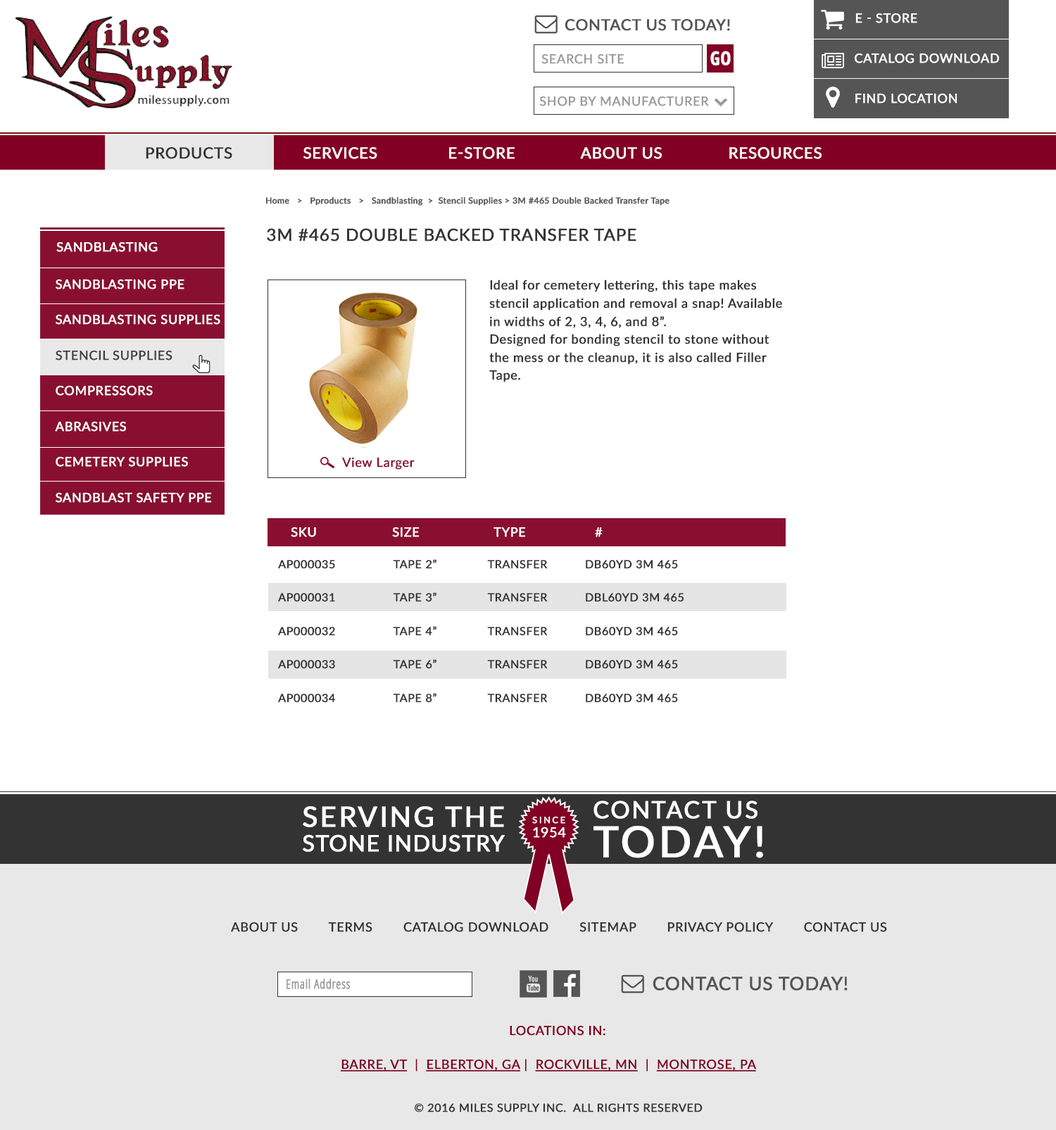
<style>
.page{position:relative;width:1056px;height:1130px;background:#ffffff}
.page>*{position:absolute;margin:0}
.t1{font:12.6px "Lato-Regular";letter-spacing:0.02em;color:#fefefe;text-transform:uppercase;font-weight:bold}
.t2{font:15.4px "Lato-Medium";letter-spacing:0.02em;color:#555555;text-transform:uppercase;font-weight:bold}
.t3{font:18.7px "OpenSans-CondensedBold";letter-spacing:0.02em;color:#ffffff;text-transform:uppercase;font-weight:bold;scale:0.94 1}
.t4{font:12.6px "Lato-Regular";letter-spacing:0.02em;color:#ffffff;text-transform:uppercase;font-weight:bold}
.t5{font:12.6px "Lato-Regular";letter-spacing:0.02em;color:#999999;text-transform:uppercase;font-weight:bold}
.t6{font:15.4px "Lato-Regular";letter-spacing:0.02em;color:#ffffff;text-transform:uppercase;font-weight:bold}
.t7{font:15.4px "Lato-Regular";letter-spacing:0.02em;color:#333333;text-transform:uppercase;font-weight:bold}
.t8{font:8.4px "Lato-Regular";letter-spacing:0.02em;color:#555555;font-weight:bold}
.t9{font:16.8px "Lato-Regular";letter-spacing:0.02em;color:#333333;text-transform:uppercase;font-weight:bold}
.t10{font:12.6px "Lato-Medium";letter-spacing:0.02em;color:#fefefe;text-transform:uppercase;font-weight:bold}
.t11{font:12.6px/35.5px "Lato-Regular";letter-spacing:0.02em;color:#ffffff;text-transform:uppercase;font-weight:bold}
.t12{font:12.6px/35.5px "Lato-Regular";letter-spacing:0.02em;color:#333333;text-transform:uppercase;font-weight:bold}
.t13{font:12.6px/18px "Lato-Regular";letter-spacing:0.02em;color:#333333;font-weight:bold}
.t14{font:12.6px "Lato-Regular";letter-spacing:0.02em;color:#890f31;font-weight:bold}
.t15{font:12.6px "Lato-Regular";letter-spacing:0.02em;color:#ffffff;font-weight:bold}
.t16{font:11.2px/33.4px "Lato-Regular";letter-spacing:0.02em;color:#333333;font-weight:bold}
.t17{font:22.4px/25px "Lato-Regular";letter-spacing:0.02em;color:#ffffff;text-transform:uppercase;font-weight:bold}
.t18{font:28px/25px "Lato-Regular";letter-spacing:0.06em;color:#ffffff;text-transform:uppercase;font-weight:bold}
.t19{font:23.8px/38.3px "Lato-Regular";letter-spacing:0.06em;color:#ffffff;text-transform:uppercase;font-weight:bold}
.t20{font:42.8px/38.3px "Lato-Regular";letter-spacing:0.06em;color:#ffffff;text-transform:uppercase;font-weight:bold}
.t21{font:8.8px "Lato-Regular";letter-spacing:0.2em;color:#ffffff;text-transform:uppercase;font-weight:bold}
.t22{font:13.8px "Lato-Regular";letter-spacing:0.02em;color:#ffffff;text-transform:uppercase;font-weight:bold}
.t23{font:13.8px "Lato-Light";letter-spacing:0.02em;color:#ffffff;text-transform:uppercase;font-weight:bold}
.t24{font:12.6px "Lato-Regular";letter-spacing:0.02em;color:#333333;text-transform:uppercase;font-weight:bold}
.t25{font:18.2px "Lato-Regular";letter-spacing:0.02em;color:#555555;text-transform:uppercase;font-weight:bold}
.t26{font:12.6px "OpenSans-CondensedLight";letter-spacing:0.02em;color:#999999;font-weight:bold}
.t27{font:12.6px "Lato-Medium";letter-spacing:0.02em;color:#820024;text-transform:uppercase;font-weight:bold}
.t28{font:12.6px "Lato-Regular";letter-spacing:0.02em;color:#820024;text-transform:uppercase;font-weight:bold;text-decoration:underline}
.t29{font:12.6px "Lato-Regular";letter-spacing:0.02em;color:#820024;text-transform:uppercase;font-weight:bold}
.t30{font:11.2px "Lato-Regular";letter-spacing:0.02em;color:#333333;text-transform:uppercase;font-weight:bold}
</style>
<div class="page">
<p class="t1" style="left:855px;top:13px;width:62px;height:10px">E - STORE</p>
<p class="t2" style="left:564px;top:19px;width:166px;height:12px">Contact Us Today!</p>
<p class="t3" style="left:710px;top:51px;width:21px;height:14px">GO</p>
<p class="t4" style="left:854px;top:53px;width:145px;height:10px">CATALOG DOWNLOAD</p>
<p class="t5" style="left:541px;top:54px;width:83px;height:10px">SEARCH SITE</p>
<p class="t5" style="left:539px;top:96px;width:170px;height:10px">SHOP BY MANUFACTURER</p>
<p class="t4" style="left:855px;top:93px;width:102px;height:10px">FIND LOCATION</p>
<p class="t6" style="left:146px;top:147px;width:675px;height:12px"><span class="t7">PRODUCTS</span>               SERVICES               E-STORE              ABOUT US              RESOURCES</p>
<p class="t8" style="left:265px;top:197px;width:404px;height:9px">Home   &gt;   Pproducts   &gt;   Sandblasting  &gt;  Stencil Supplies &gt; 3M #465 Double Backed Transfer Tape</p>
<p class="t9" style="left:267px;top:228px;width:369px;height:13px">3M #465 Double Backed Transfer Tape</p>
<p class="t10" style="left:56px;top:242px;width:102px;height:10px">SANDBLASTING</p>
<p class="t11" style="left:55px;top:279px;width:165px;height:223px">SANDBLASTING PPE<br>SANDBLASTING SUPPLIES<br><span class="t12">STENCIL SUPPLIEs<br></span>COMPRESSORS<br>ABRASIVES<br>CEMETERY SUPPLIES<br>SANDBLAST SAFETY PPE</p>
<p class="t13" style="left:489px;top:279px;width:293px;height:103px">Ideal for cemetery lettering, this tape makes stencil application and removal a snap! Available in widths of 2, 3, 4, 6, and 8”. <br>Designed for bonding stencil to stone without the mess or the cleanup, it is also called Filler Tape.</p>
<p class="t14" style="left:342px;top:457px;width:73px;height:12px">View Larger</p>
<p class="t15" style="left:291px;top:526px;width:311px;height:11px">SKU   SIZE   TYPE   #</p>
<p class="t16" style="left:278px;top:559px;width:406px;height:143px">AP000035                 TAPE 2”               TRANSFER           DB60YD 3M 465<br>AP000031                 TAPE 3”               TRANSFER           DBL60YD 3M 465<br>AP000032                 TAPE 4”               TRANSFER           DB60YD 3M 465<br>AP000033                 TAPE 6”               TRANSFER           DB60YD 3M 465<br>AP000034                 TAPE 8”               TRANSFER           DB60YD 3M 465</p>
<p class="t17" style="left:303px;top:806px;width:202px;height:46px"><span class="t18">SERVING THE</span> <br>STONE INDUSTRY</p>
<p class="t19" style="left:593px;top:800px;width:170px;height:58px">CONTACT US<br><span class="t20">TODAY!</span></p>
<p class="t21" style="left:532px;top:816px;width:33px;height:7px">since</p>
<p class="t22" style="left:533px;top:826px;width:33px;height:11px"><span class="t23"> </span>1954</p>
<p class="t24" style="left:231px;top:921px;width:656px;height:11px">ABOUT US        TERMS        CATALOG DOWNLOAD        SITEMAP        PRIVACY POLICY        CONTACT US</p>
<p class="t25" style="left:652px;top:976px;width:195px;height:14px">Contact Us Today!</p>
<p class="t26" style="left:286px;top:978px;width:64px;height:11px">Email Address</p>
<p class="t27" style="left:510px;top:1025px;width:95px;height:10px">LOCATIONS IN:</p>
<p class="t28" style="left:341px;top:1058px;width:415px;height:13px">Barre, VT<span class="t29">  |  </span>Elberton, GA<span class="t29"> |  </span>Rockville, MN<span class="t29">  |  </span>Montrose, PA</p>
<p class="t30" style="left:414px;top:1103px;width:288px;height:9px">© 2016 Miles Supply Inc.  ALL RIGHTS RESERVED</p>
</div>
